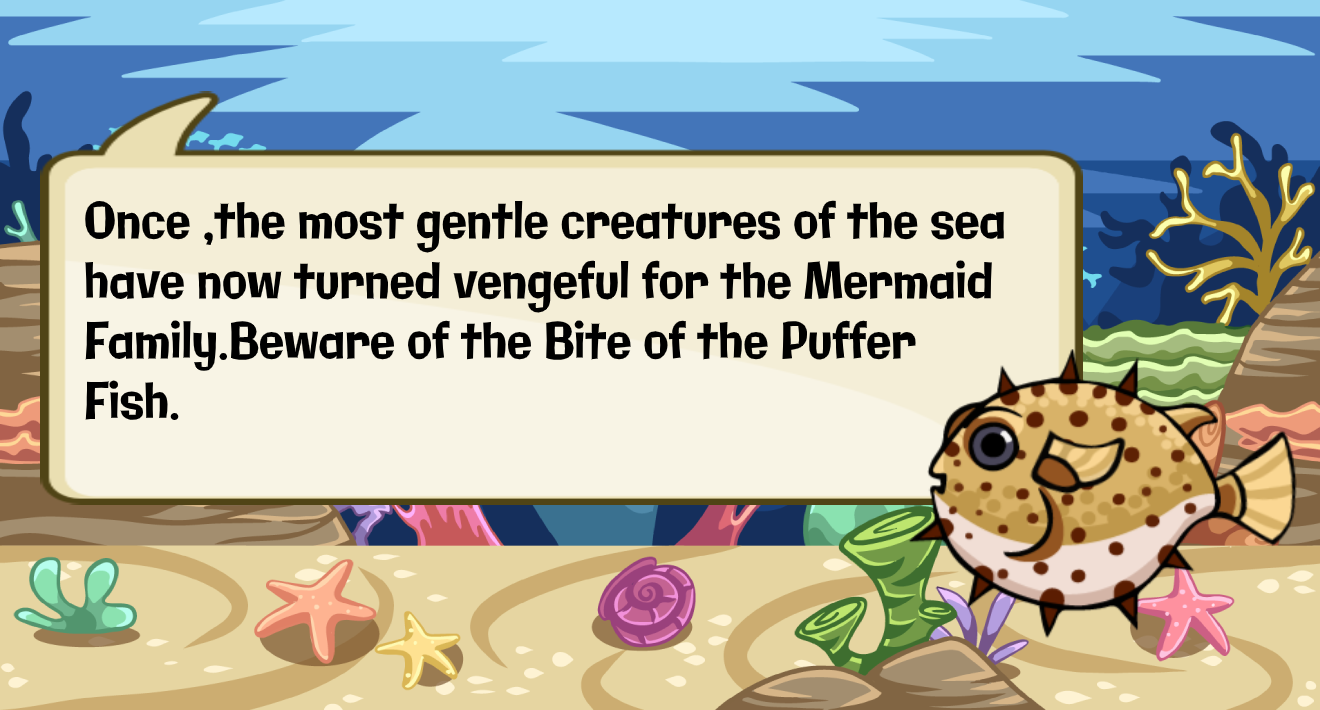
<style>
.page{position:relative;width:1320px;height:710px}
.page>*{position:absolute;margin:0}
.t1{font:50.1px "Galindo-Regular";color:#000000;scale:0.82 1}
</style>
<div class="page">
<p class="t1" style="left:85px;top:200px;width:919px;height:221px">Once ,the most gentle creatures of the sea <br>have now turned vengeful for the Mermaid <br>Family.Beware of the Bite of the Puffer <br>Fish.</p>
</div>
